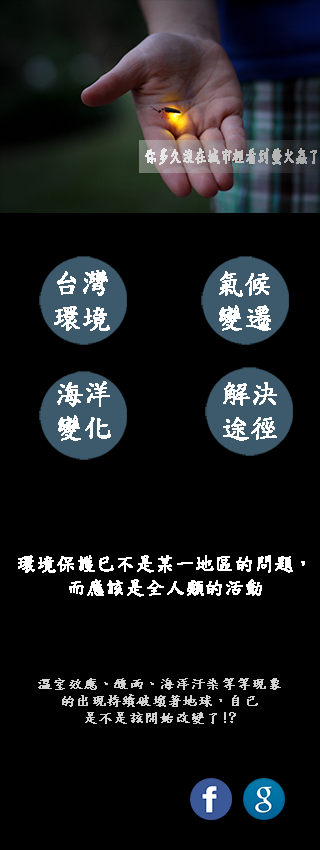
<style>
.page{position:relative;width:320px;height:850px;background:#000000}
.page>*{position:absolute;margin:0}
.t1{font:28.5px "DFKaiShu-SB-Estd-BF";color:#ffffff;font-weight:bold}
.t2{font:19.3px "DFKaiShu-SB-Estd-BF";color:#ffffff;font-weight:bold}
.t3{font:14px "DFKaiShu-SB-Estd-BF";color:#d2d2d2;font-weight:bold;scale:1.05 1}
</style>
<div class="page">
<p class="t1" style="left:54px;top:270px;width:56px;height:61px;text-align:right">台灣<br>環境</p>
<p class="t1" style="left:219px;top:271px;width:52px;height:60px;text-align:right">氣候<br>變遷</p>
<p class="t1" style="left:57px;top:381px;width:54px;height:60px;text-align:right">海洋<br>變化</p>
<p class="t1" style="left:223px;top:382px;width:54px;height:59px;text-align:right">解決<br>途徑</p>
<p class="t2" style="left:18px;top:555px;width:287px;height:42px;text-align:center">環境保護已不是某一地區的問題，<br>而應該是全人類的活動</p>
<p class="t3" style="left:38px;top:678px;width:243px;height:46px;text-align:center">溫室效應、酸雨、海洋汙染等等現象<br>的出現持續破壞著地球，自己<br>是不是該開始改變了!?</p>
</div>
